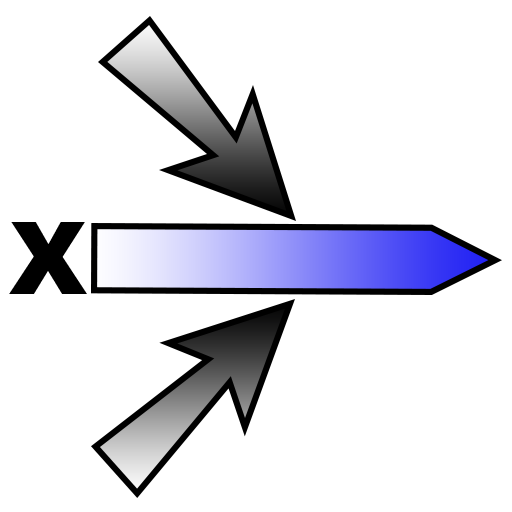
<style>
.page{position:relative;width:512px;height:512px;background:#ffffff}
.page>*{position:absolute;margin:0}
.t1{font:100px "Arial-Black";color:#000000}
</style>
<div class="page">
<p class="t1" style="left:9px;top:222px;width:78px;height:72px">X</p>
</div>
